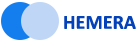
<style>
.page{position:relative;width:140px;height:42px;background:#ffffff}
.page>*{position:absolute;margin:0}
.t1{font:20px "Calibri-Bold";color:#0442ba}
</style>
<div class="page">
<p class="t1" style="left:64px;top:16px;width:72px;height:13px">HEMERA</p>
</div>
